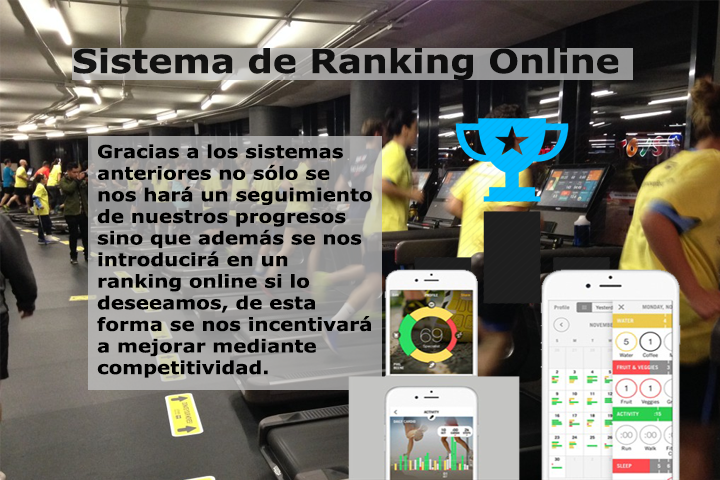
<style>
.page{position:relative;width:720px;height:480px}
.page>*{position:absolute;margin:0}
.t1{font:33px "Verdana-Bold";color:#000000;scale:1.1 1}
.t2{font:18px "Verdana-Bold";color:#000000;scale:1.1 1}
</style>
<div class="page">
<p class="t1" style="left:73px;top:48px;width:546px;height:32px;opacity:0.95">Sistema de Ranking Online</p>
<p class="t2" style="left:97px;top:144px;width:275px;height:234px">Gracias a los sistemas anteriores no sólo se nos hará un seguimiento de nuestros progresos sino que además se nos introducirá en un ranking online si lo deseeamos, de esta forma se nos incentivará a mejorar mediante competitividad.</p>
</div>
